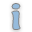
<style>
.page{position:relative;width:32px;height:32px;background:#ffffff}
.page>*{position:absolute;margin:0}
.t1{font:36px "MaiandraGD-Regular";color:#96bbdc;scale:1.5 1}
</style>
<div class="page">
<p class="t1" style="left:12px;top:4px;width:8px;height:25px">i</p>
</div>
